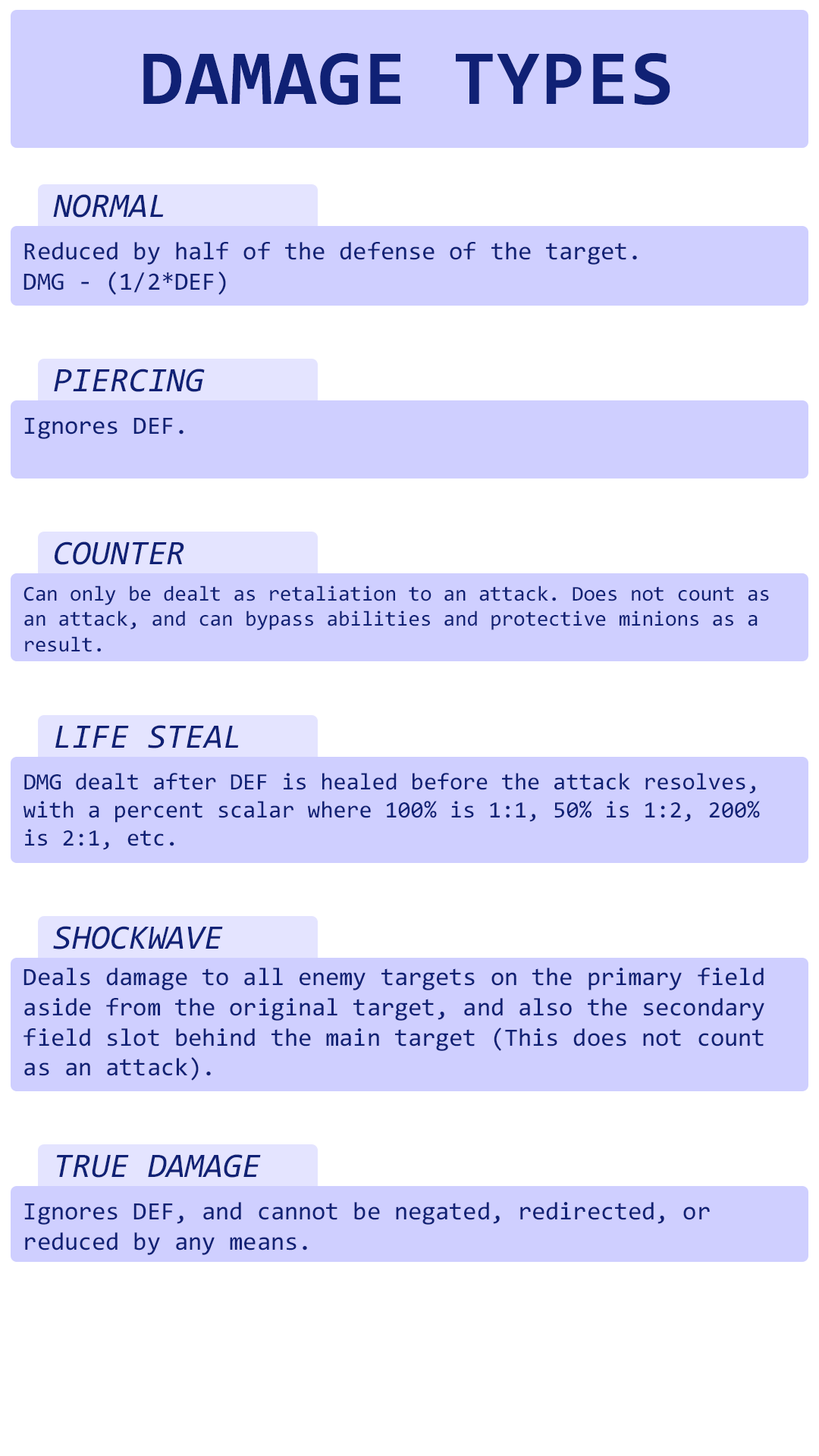
<style>
.page{position:relative;width:819px;height:1456px;background:#ffffff}
.page>*{position:absolute;margin:0}
.t1{font:78.3px "Consolas-Bold";letter-spacing:0.02em;color:#102175}
.t2{font:34.3px "Consolas-Italic";color:#102175}
.t3{font:25px "Consolas";color:#102175}
.t4{font:21.2px "Consolas";color:#102175}
.t5{font:23.5px "Consolas";color:#102175}
</style>
<div class="page">
<p class="t1" style="left:143px;top:53px;width:527px;height:52px">DAMAGE TYPES</p>
<p class="t2" style="left:53px;top:194px;width:111px;height:24px">NORMAL</p>
<p class="t3" style="left:24px;top:242px;width:613px;height:53px">Reduced by half of the defense of the target. <br>DMG - (1/2*DEF)</p>
<p class="t2" style="left:54px;top:369px;width:151px;height:23px">PIERCING</p>
<p class="t3" style="left:24px;top:418px;width:160px;height:21px">Ignores DEF.</p>
<p class="t2" style="left:55px;top:541px;width:129px;height:24px">COUNTER</p>
<p class="t4" style="left:24px;top:585px;width:745px;height:67px">Can only be dealt as retaliation to an attack. Does not count as an attack, and can bypass abilities and protective minions as a result.</p>
<p class="t2" style="left:55px;top:725px;width:184px;height:23px">LIFE STEAL</p>
<p class="t5" style="left:24px;top:773px;width:736px;height:77px">DMG dealt after DEF is healed before the attack resolves, with a percent scalar where 100% is 1:1, 50% is 1:2, 200% is 2:1, etc.</p>
<p class="t2" style="left:53px;top:926px;width:170px;height:23px">SHOCKWAVE</p>
<p class="t3" style="left:24px;top:968px;width:740px;height:113px">Deals damage to all enemy targets on the primary field aside from the original target, and also the secondary field slot behind the main target (This does not count as an attack).</p>
<p class="t2" style="left:56px;top:1154px;width:205px;height:24px">TRUE DAMAGE</p>
<p class="t3" style="left:24px;top:1202px;width:686px;height:53px">Ignores DEF, and cannot be negated, redirected, or reduced by any means.</p>
</div>
